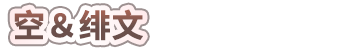
<style>
.page{position:relative;width:360px;height:50px;background:#ffffff}
.page>*{position:absolute;margin:0}
.t1{font:32px "SourceHanSansSC-Bold";font-weight:bold}
</style>
<div class="page">
<p class="t1" style="left:14px;top:9px;width:129px;height:32px">空＆绯文</p>
</div>
